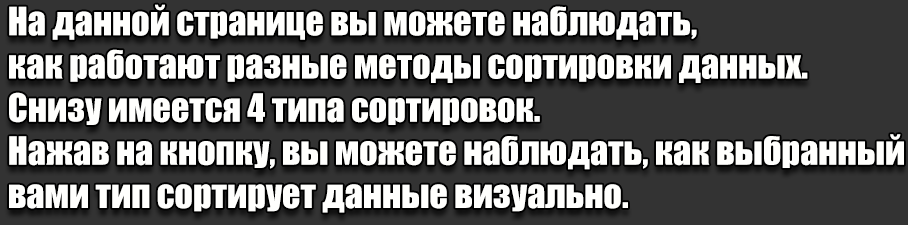
<style>
.page{position:relative;width:908px;height:225px;background:#333333}
.page>*{position:absolute;margin:0}
.t1{font:36px "Impact";color:#fffffd}
</style>
<div class="page">
<p class="t1" style="left:9px;top:4px;width:895px;height:209px">На данной странице вы можете наблюдать, <br>как работают разные методы сортировки данных. <br>Снизу имеется 4 типа сортировок.<br>Нажав на кнопку, вы можете наблюдать, как выбранный<br>вами тип сортирует данные визуально.</p>
</div>
